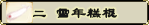
<style>
.page{position:relative;width:149px;height:25px;background:#d9d5bd}
.page>*{position:absolute;margin:0}
.t1{font:13.3px "LiSu";color:#161616;font-weight:bold}
.t2{font:15px "LiSu";color:#161616;font-weight:bold}
</style>
<div class="page">
<p class="t1" style="left:32px;top:10px;width:14px;height:8px">二</p>
<p class="t2" style="left:56px;top:7px;width:61px;height:12px">雪年糕棍</p>
</div>
